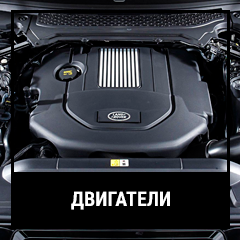
<style>
.page{position:relative;width:240px;height:240px;background:#000000}
.page>*{position:absolute;margin:0}
.t1{font:20px "RobotoCondensed-Bold";color:#ffffff}
</style>
<div class="page">
<p class="t1" style="left:71px;top:191px;width:99px;height:19px">ДВИГАТЕЛИ</p>
</div>
